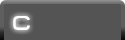
<style>
.page{position:relative;width:125px;height:40px;background:#545454}
.page>*{position:absolute;margin:0}
.t1{font:20.1px "MetroDF";color:#ffffff}
</style>
<div class="page">
<p class="t1" style="left:13px;top:16px;width:17px;height:14px">C</p>
</div>
